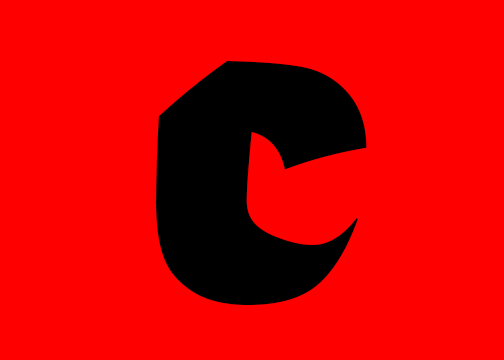
<style>
.page{position:relative;width:504px;height:360px;background:#ff0000}
.page>*{position:absolute;margin:0}
.t1{font:564.1px "MaturaMTScriptCapitals";color:#000000}
</style>
<div class="page">
<p class="t1" style="left:156px;top:60px;width:211px;height:245px">c</p>
</div>
